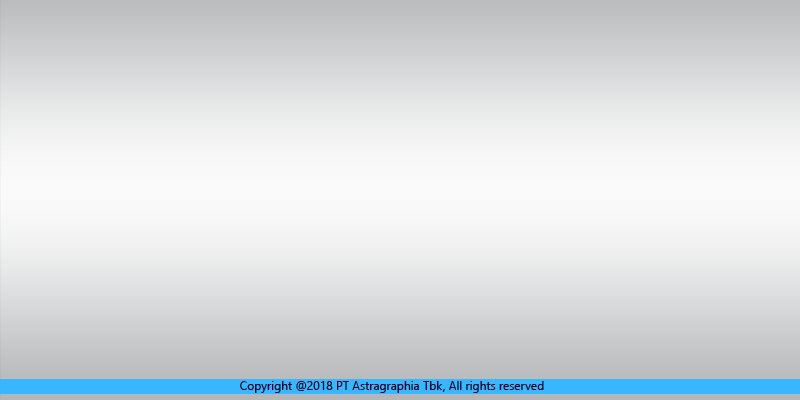
<style>
.page{position:relative;width:800px;height:400px}
.page>*{position:absolute;margin:0}
.t1{font:12px "SegoeUISymbol";color:#090526}
</style>
<div class="page">
<p class="t1" style="left:240px;top:381px;width:304px;height:12px">Copyright @2018 PT Astragraphia Tbk, All rights reserved</p>
</div>
